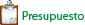
<style>
.page{position:relative;width:85px;height:25px;background:#ffffff}
.page>*{position:absolute;margin:0}
.t1{font:12px "MyriadPro-Regular";color:#009045}
</style>
<div class="page">
<p class="t1" style="left:22px;top:11px;width:62px;height:11px">Presupuesto</p>
</div>
